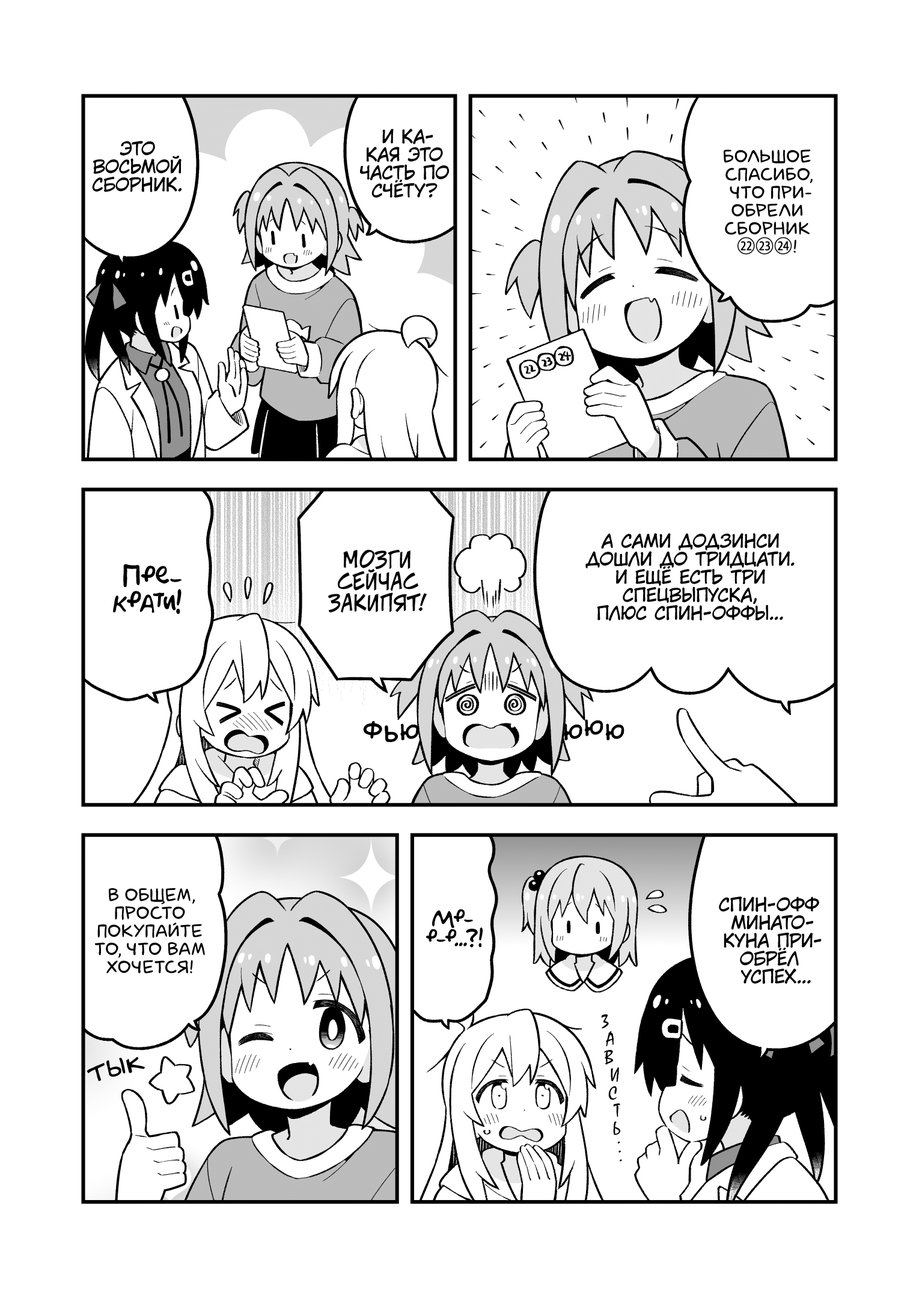
<style>
.page{position:relative;width:919px;height:1298px;background:#ffffff}
.page>*{position:absolute;margin:0}
.t1{font:18px "KuraiVoice2";color:#000000;text-transform:uppercase}
.t2{font:18px "laCartoonerie";color:#000000;text-transform:uppercase}
.t3{font:18px "KozGoPr6N-Regular";color:#000000;text-transform:uppercase;font-weight:bold}
.t4{font:21.6px "v_CCJeffCampbell";color:#000000;text-transform:uppercase}
.t5{font:25.2px "AkbarPlain";color:#000000}
.t6{font:28.8px "v_BillyTheFlyingRobotBBLC";color:#000000;text-transform:uppercase}
.t7{font:19.8px "AkbarPlain";color:#000000}
.t8{font:18px "MistralC";color:#000000;text-transform:uppercase}
.t9{font:18px "MistralC";letter-spacing:-0.5em;color:#000000;text-transform:uppercase}
.t10{font:32.4px "v_Augie";color:#000000}
</style>
<div class="page">
<p class="t1" style="left:360px;top:129px;width:89px;height:69px;text-align:center">И ка-<br>кая это<br>часть по<br>счёту?</p>
<p class="t1" style="left:92px;top:141px;width:89px;height:51px;text-align:center">Это<br>восьмой<br>сборник.</p>
<p class="t2" style="left:723px;top:150px;width:89px;height:105px;text-align:center">Большое<br>спасибо,<br>что при-<br>обрели<br>сборник<br><span class="t3">㉒㉓㉔</span>!</p>
<p class="t1" style="left:585px;top:533px;width:209px;height:88px;text-align:center">А сами додзинси<br>дошли до тридцати.<br>И ещё есть три<br>спецвыпуска,<br>плюс спин-оффы...</p>
<p class="t4" style="left:328px;top:550px;width:99px;height:63px;text-align:center">Мозги<br>сейчас<br>закипят!</p>
<p class="t5" style="left:113px;top:564px;width:69px;height:50px;text-align:center">Пре-<br>крати!</p>
<p class="t6" style="left:363px;top:721px;width:56px;height:21px">фью</p>
<p class="t6" style="left:564px;top:719px;width:60px;height:21px">ююю</p>
<p class="t2" style="left:95px;top:888px;width:110px;height:85px;text-align:center">В общем,<br>просто<br>покупайте<br>то, что вам<br>хочется!</p>
<p class="t1" style="left:719px;top:896px;width:102px;height:88px;text-align:center">Спин-офф<br>Минато-<br>куна при-<br>обрёл<br>успех...</p>
<p class="t7" style="left:426px;top:909px;width:57px;height:39px;text-align:center">Мр-<br>р-р...?!</p>
<p class="t8" style="left:601px;top:1014px;width:21px;height:147px;rotate:-6deg">завист<span class="t9">ь...</span></p>
<p class="t10" style="left:87px;top:1056px;width:58px;height:25px;rotate:-15deg">тык</p>
</div>
